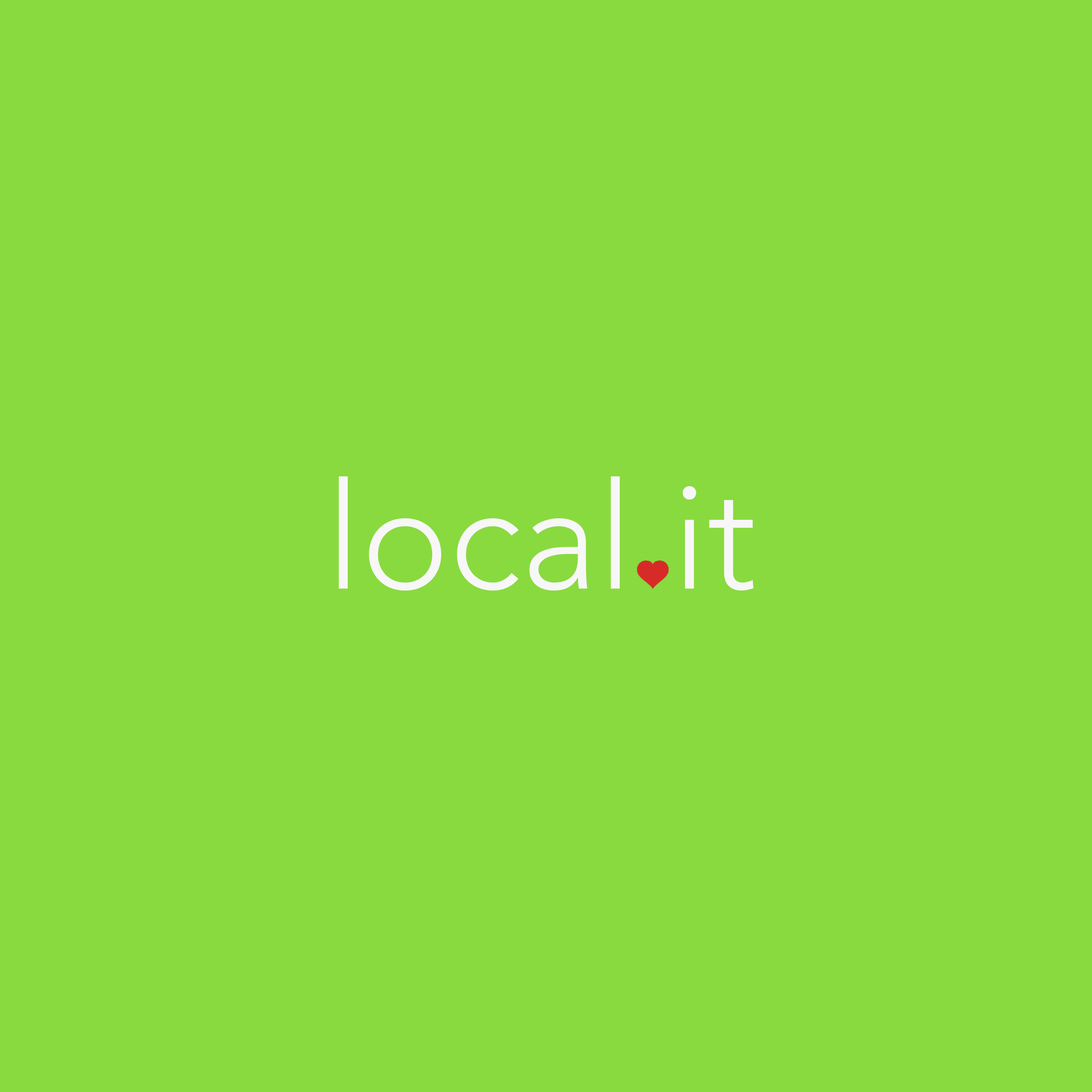
<style>
.page{position:relative;width:1092px;height:1092px;background:#89da3e}
.page>*{position:absolute;margin:0}
.t1{font:148.4px "Avenir-Light";color:#f7f7f7}
</style>
<div class="page">
<p class="t1" style="left:339px;top:476px;width:415px;height:115px">local it</p>
</div>
